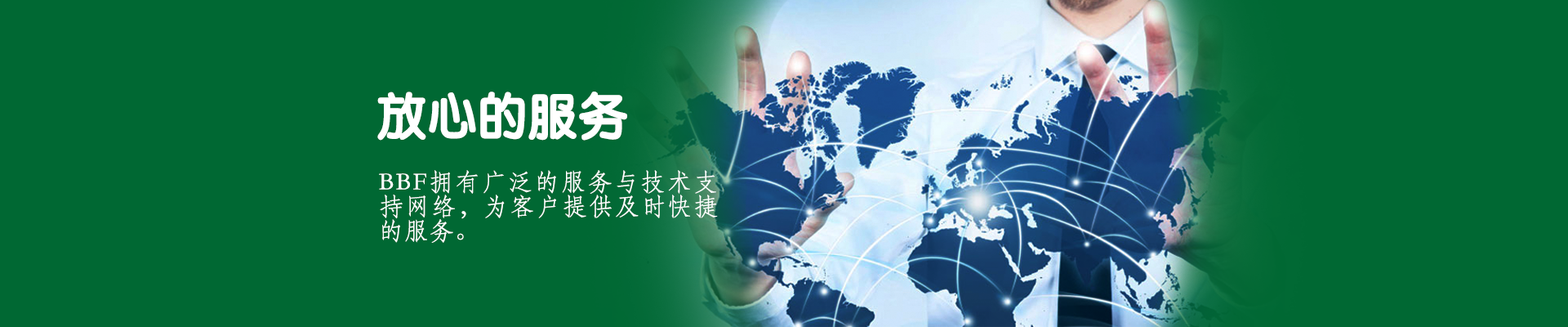
<style>
.page{position:relative;width:1568px;height:327px;background:#006833}
.page>*{position:absolute;margin:0}
.t1{font:49px "STYuanti-SC-Bold";color:#ffffff;text-transform:uppercase;font-weight:bold}
.t2{font:24.5px/24.5px "STFangsong";color:#ffffff;text-transform:uppercase;font-weight:bold}
</style>
<div class="page">
<p class="t1" style="left:377px;top:91px;width:250px;height:49px">放心的服务</p>
<p class="t2" style="left:379px;top:170px;width:339px;height:73px;text-align:justify">BBF拥有广泛的服务与技术支持网络，为客户提供及时快捷的服务。</p>
</div>
